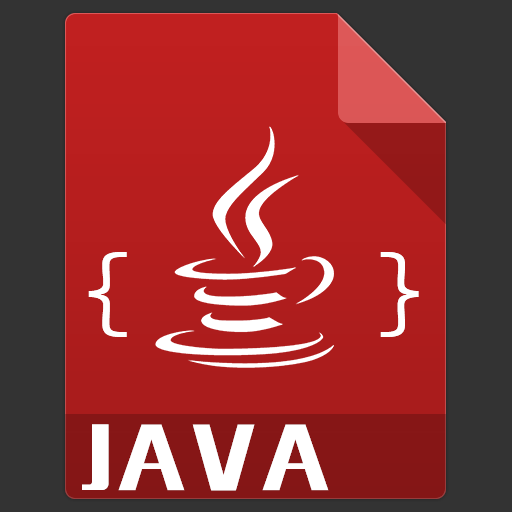
<style>
.page{position:relative;width:512px;height:512px;background:#333333}
.page>*{position:absolute;margin:0}
.t1{font:99px "SourceCodeProYaHeiHybrid";letter-spacing:0.07em;color:#ffffff}
.t2{font:72px "MFLiHei_Noncommercial-Regular";letter-spacing:0.07em;color:#ffffff}
</style>
<div class="page">
<p class="t1" style="left:88px;top:252px;width:331px;height:85px">{    }</p>
<p class="t2" style="left:82px;top:424px;width:247px;height:67px">JAVA</p>
</div>
